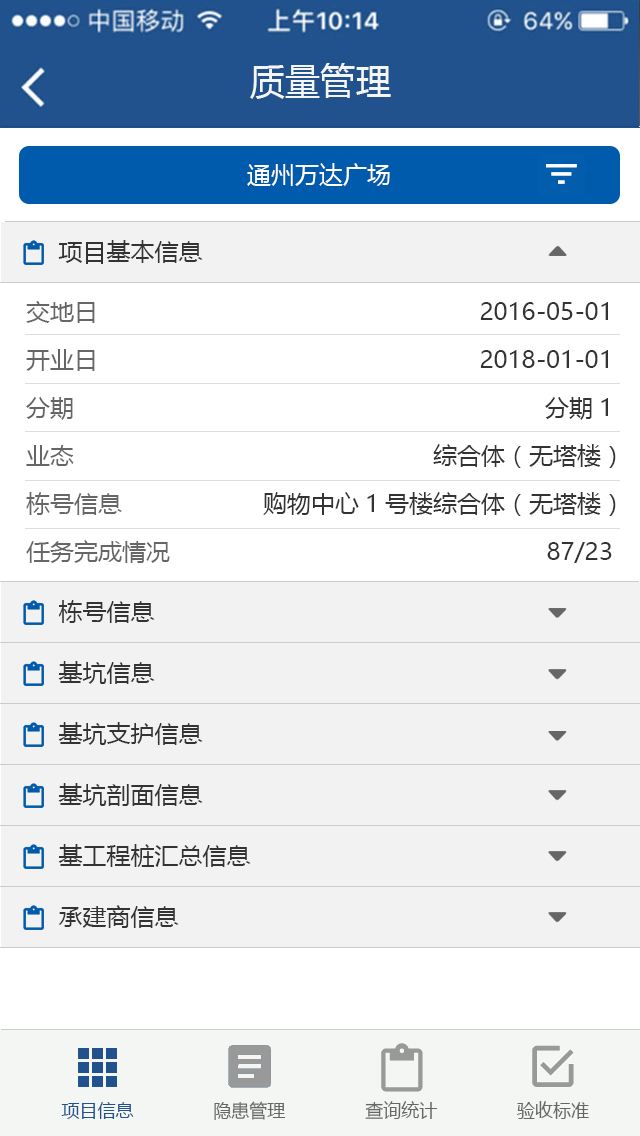
<style>
.page{position:relative;width:640px;height:1136px;background:#ffffff}
.page>*{position:absolute;margin:0}
.t1{font:36px "MicrosoftYaHei";color:#f3f6f3}
.t2{font:24px "MicrosoftYaHei";color:#ffffff}
.t3{font:24px "MicrosoftYaHei";color:#333333}
.t4{font:24px/48px "MicrosoftYaHei";color:#666666}
.t5{font:24px/48px "MicrosoftYaHei";color:#333333}
.t6{font:18px "MicrosoftYaHei";color:#666666}
.t7{font:18px "MicrosoftYaHei";color:#21528d}
</style>
<div class="page">
<p class="t1" style="left:250px;top:63px;width:141px;height:36px">质量管理</p>
<p class="t2" style="left:247px;top:163px;width:143px;height:23px">通州万达广场</p>
<p class="t3" style="left:58px;top:240px;width:145px;height:24px">项目基本信息</p>
<p class="t4" style="left:26px;top:301px;width:144px;height:262px">交地日 <br>开业日<br>分期<br>业态<br>栋号信息<br>任务完成情况</p>
<p class="t5" style="left:263px;top:302px;width:353px;height:261px;text-align:right">2016-05-01<br>2018-01-01<br>分期1<br>综合体（无塔楼）<br>购物中心1号楼综合体（无塔楼）<br>87/23</p>
<p class="t3" style="left:58px;top:600px;width:97px;height:23px">栋号信息</p>
<p class="t3" style="left:58px;top:661px;width:97px;height:23px">基坑信息</p>
<p class="t3" style="left:58px;top:722px;width:145px;height:23px">基坑支护信息</p>
<p class="t3" style="left:58px;top:783px;width:145px;height:23px">基坑剖面信息</p>
<p class="t3" style="left:58px;top:844px;width:193px;height:23px">基工程桩汇总信息</p>
<p class="t3" style="left:58px;top:905px;width:121px;height:23px">承建商信息</p>
<p class="t6" style="left:61px;top:1101px;width:528px;height:19px"><span class="t7">项目信息</span>               隐患管理               查询统计               验收标准</p>
</div>
